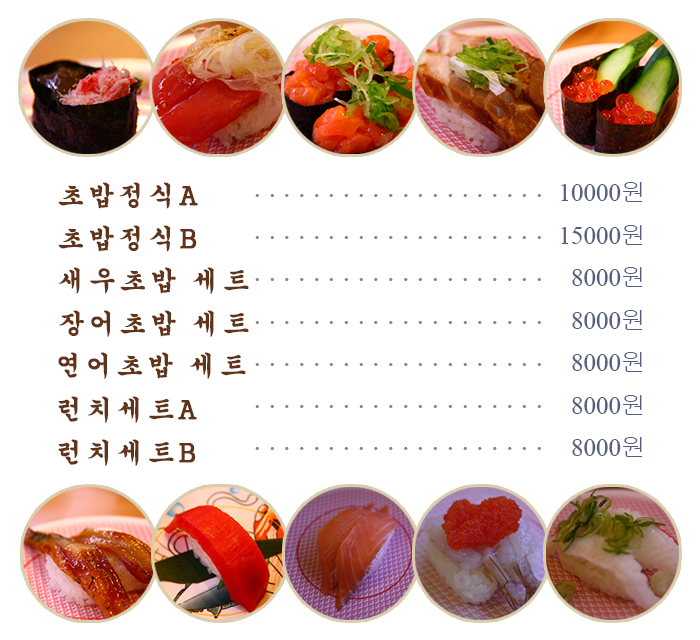
<style>
.page{position:relative;width:700px;height:640px;background:#ffffff}
.page>*{position:absolute;margin:0}
.t1{font:27px "H2gsrB";letter-spacing:0.1em;color:#613319;font-weight:bold}
.t2{font:25px "TimesNewRomanPSMT";color:#555e81}
.t3{font:25px "Gulim";color:#555e81}
</style>
<div class="page">
<p class="t1" style="left:58px;top:182px;width:140px;height:27px">초밥정식A</p>
<p class="t2" style="left:561px;top:182px;width:82px;height:20px">10000<span class="t3">원</span></p>
<p class="t1" style="left:58px;top:225px;width:139px;height:27px">초밥정식B</p>
<p class="t2" style="left:561px;top:225px;width:82px;height:20px">15000<span class="t3">원</span></p>
<p class="t1" style="left:59px;top:267px;width:190px;height:27px">새우초밥 세트</p>
<p class="t2" style="left:572px;top:267px;width:71px;height:20px">8000<span class="t3">원</span></p>
<p class="t1" style="left:59px;top:310px;width:190px;height:27px">장어초밥 세트</p>
<p class="t2" style="left:572px;top:310px;width:71px;height:20px">8000<span class="t3">원</span></p>
<p class="t1" style="left:58px;top:352px;width:188px;height:27px">연어초밥 세트</p>
<p class="t2" style="left:572px;top:352px;width:71px;height:20px">8000<span class="t3">원</span></p>
<p class="t1" style="left:58px;top:396px;width:139px;height:27px">런치세트A</p>
<p class="t2" style="left:572px;top:395px;width:71px;height:20px">8000<span class="t3">원</span></p>
<p class="t2" style="left:572px;top:437px;width:71px;height:20px">8000<span class="t3">원</span></p>
<p class="t1" style="left:58px;top:439px;width:138px;height:27px">런치세트B</p>
</div>
